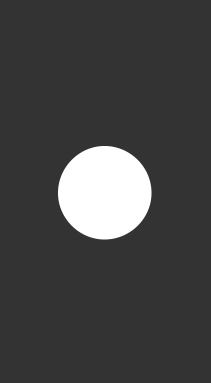
<style>
.page{position:relative;width:211px;height:383px;background:#333333}
.page>*{position:absolute;margin:0}
.t1{font:250px "HelveticaLTStd-LightCond";color:#ffffff}
</style>
<div class="page">
<p class="t1" style="left:58px;top:146px;width:94px;height:94px">•</p>
</div>
